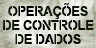
<style>
.page{position:relative;width:96px;height:48px}
.page>*{position:absolute;margin:0}
.t1{font:14px/14px "Arial-BoldMT";letter-spacing:-0.02em;color:#000000;scale:0.93 1}
</style>
<div class="page">
<p class="t1" style="left:3px;top:3px;width:91px;height:41px;text-align:center">OPERAÇÕES<br>DE CONTROLE<br>DE DADOS</p>
</div>
